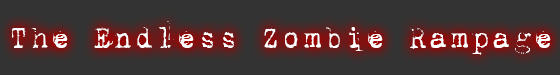
<style>
.page{position:relative;width:560px;height:75px;background:#333333}
.page>*{position:absolute;margin:0}
.t1{font:34.5px "1942report";color:#ffffff;scale:0.94 1}
</style>
<div class="page">
<p class="t1" style="left:12px;top:21px;width:539px;height:34px">The Endless Zombie Rampage</p>
</div>
